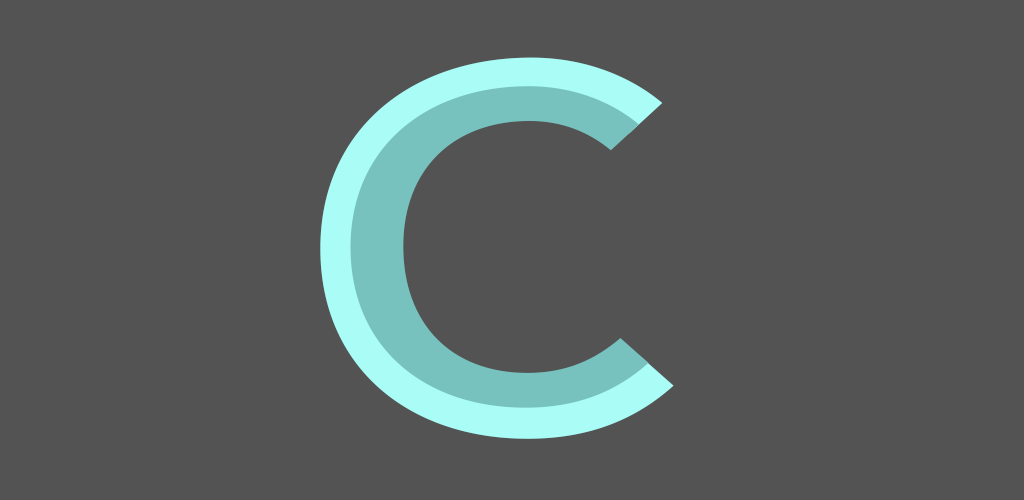
<style>
.page{position:relative;width:1024px;height:500px;background:#535353}
.page>*{position:absolute;margin:0}
.t1{font:560.1px "SourceSansRoman-Regular";scale:1.29 1}
.t2{font:472.5px "SourceSansRoman-Regular";color:#77c2be;scale:1.29 1}
</style>
<div class="page">
<p class="t1" style="left:320px;top:57px;width:354px;height:382px">C</p>
<p class="t2" style="left:350px;top:86px;width:299px;height:322px">C</p>
</div>
